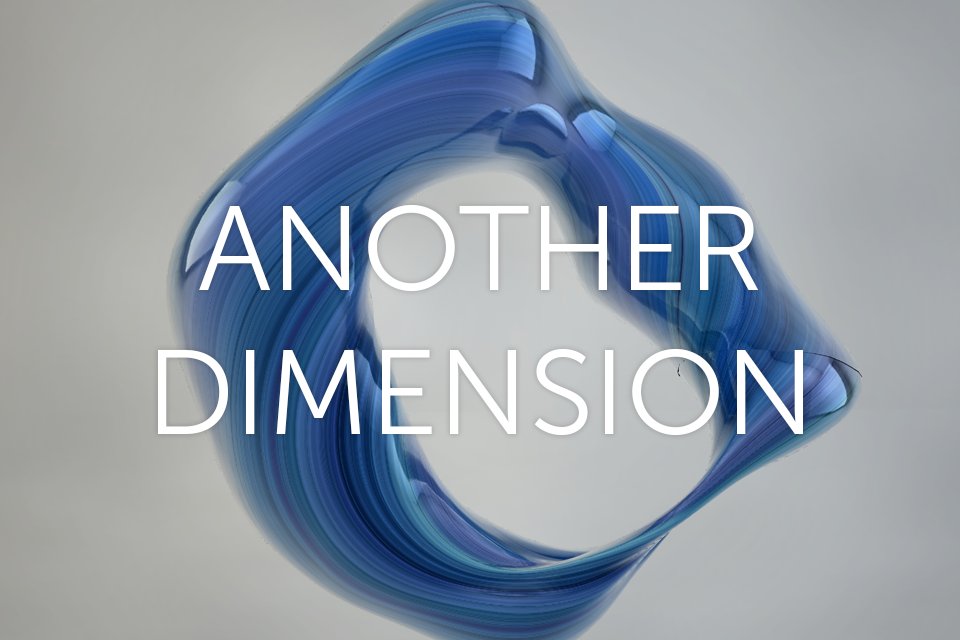
<style>
.page{position:relative;width:960px;height:640px}
.page>*{position:absolute;margin:0}
.t1{font:120px "MuseoSans-300";color:#ffffff;text-transform:uppercase}
</style>
<div class="page">
<p class="t1" style="left:158px;top:204px;width:645px;height:232px;text-align:center">another<br>dimension</p>
</div>
